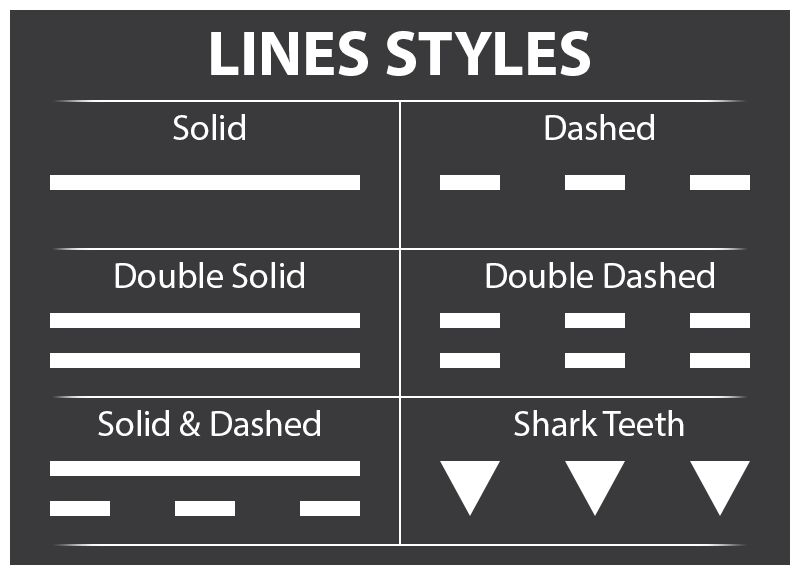
<style>
.page{position:relative;width:800px;height:575px;background:#3a3a3c}
.page>*{position:absolute;margin:0}
.t1{font:64px "MyriadPro-Bold";color:#ffffff}
.t2{font:36px "MyriadPro-Regular";color:#ffffff}
</style>
<div class="page">
<p class="t1" style="left:211px;top:31px;width:379px;height:45px">LINES STYLES</p>
<p class="t2" style="left:173px;top:114px;width:72px;height:26px">Solid</p>
<p class="t2" style="left:545px;top:114px;width:109px;height:26px">Dashed</p>
<p class="t2" style="left:115px;top:262px;width:189px;height:26px">Double Solid</p>
<p class="t2" style="left:486px;top:262px;width:228px;height:26px">Double Dashed</p>
<p class="t2" style="left:98px;top:410px;width:222px;height:26px">Solid &amp; Dashed</p>
<p class="t2" style="left:514px;top:410px;width:170px;height:26px">Shark Teeth</p>
</div>
